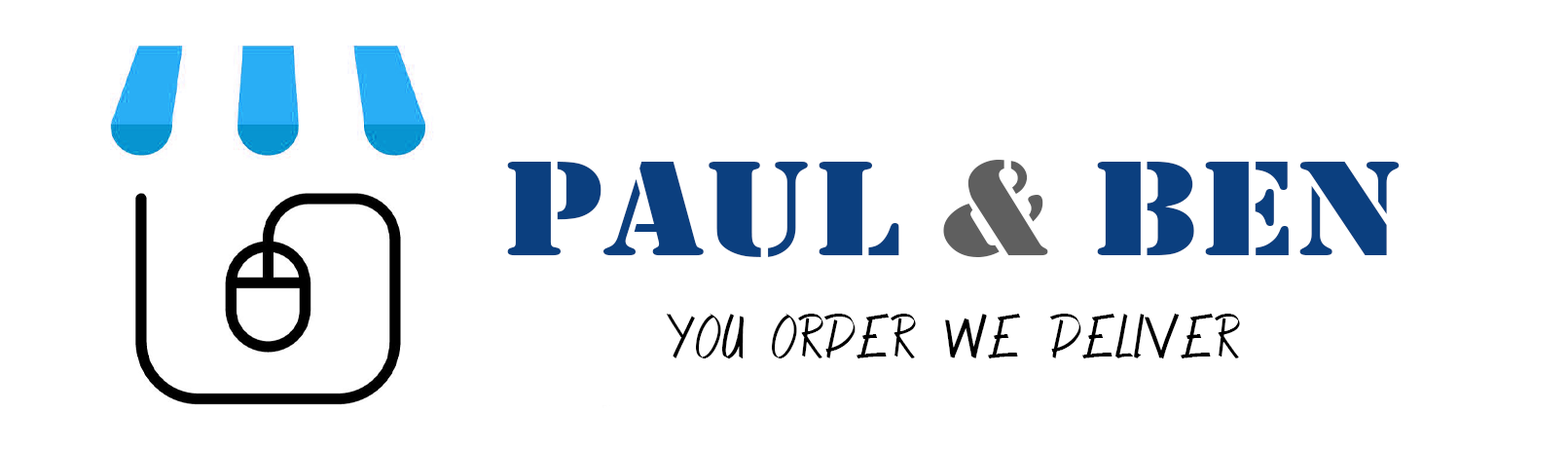
<style>
.page{position:relative;width:1568px;height:450px;background:#ffffff}
.page>*{position:absolute;margin:0}
.t1{font:140.2px "Stencil";color:#0b3f7f;scale:1.15 1}
.t2{font:140.2px "Stencil";color:#5f5f5f;scale:1.15 1}
.t3{font:55.5px "AlphaThin";color:#000000}
</style>
<div class="page">
<p class="t1" style="left:507px;top:160px;width:893px;height:97px">PAUL <span class="t2">&amp;</span> BEN</p>
<p class="t3" style="left:667px;top:313px;width:573px;height:45px">YOU ORDER WE DELIVER</p>
</div>
